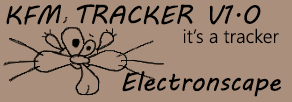
<style>
.page{position:relative;width:292px;height:102px;background:#aa907c}
.page>*{position:absolute;margin:0}
.t1{font:26px "MVBoli";color:#000000}
.t2{font:19px "NirmalaUI-Semilight";color:#000000}
</style>
<div class="page">
<p class="t1" style="left:6px;top:4px;width:255px;height:21px">KFM TRACKER V1.0</p>
<p class="t2" style="left:183px;top:28px;width:96px;height:16px">it’s a tracker</p>
<p class="t1" style="left:122px;top:71px;width:159px;height:26px">Electronscape</p>
</div>
